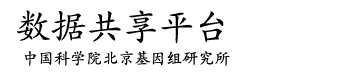
<style>
.page{position:relative;width:350px;height:75px;background:#ffffff}
.page>*{position:absolute;margin:0}
.t1{font:36px "STKaiti";color:#000000}
.t2{font:16px "STKaiti";color:#000000}
</style>
<div class="page">
<p class="t1" style="left:17px;top:10px;width:207px;height:34px">数据共享平台</p>
<p class="t2" style="left:24px;top:50px;width:206px;height:17px">中国科学院北京基因组研究所</p>
</div>
